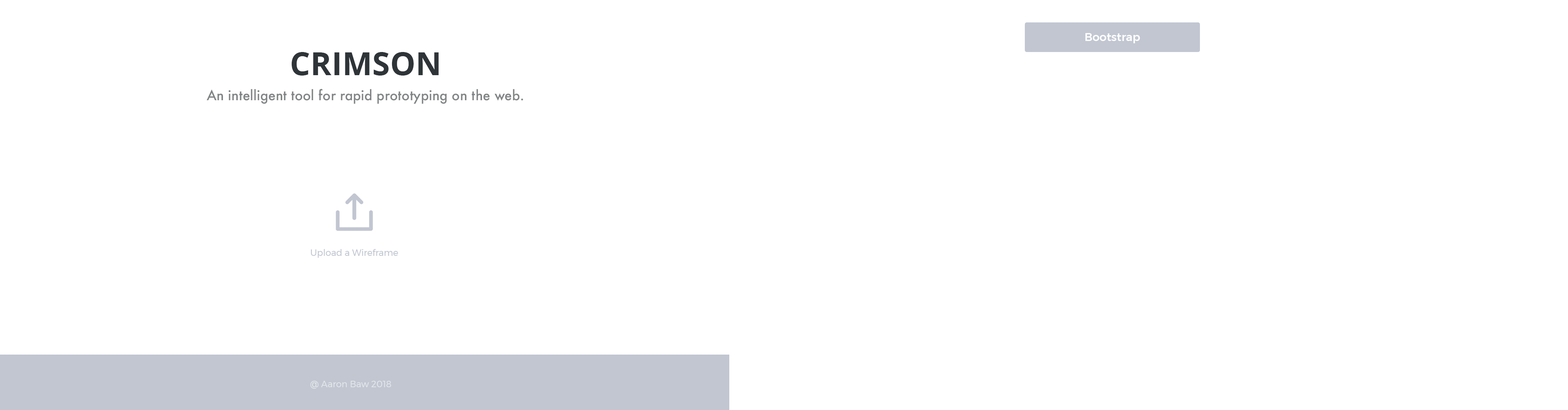
<style>
.page{position:relative;width:1568px;height:410px;background:#ffffff}
.page>*{position:absolute;margin:0}
.t1{font:11.3px "Montserrat-Medium";color:#ffffff}
.t2{font:32.1px "OpenSans-Bold";color:#2e3437}
.t3{font:13.5px "Futura-Medium";color:#828586}
.t4{font:8.9px "Montserrat-Regular";color:#c1c6d1}
.t5{font:8.9px "Montserrat-Regular";color:#e1e6ea}
</style>
<div class="page">
<p class="t1" style="left:1085px;top:33px;width:55px;height:10px">Bootstrap</p>
<p class="t2" style="left:291px;top:52px;width:148px;height:24px">CRIMSON</p>
<p class="t3" style="left:207px;top:89px;width:316px;height:15px">An intelligent tool for rapid prototyping on the web.</p>
<p class="t4" style="left:311px;top:249px;width:87px;height:9px">Upload a Wireframe</p>
<p class="t5" style="left:310px;top:381px;width:81px;height:8px">@ Aaron Baw 2018</p>
</div>
